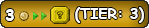
<style>
.page{position:relative;width:149px;height:28px}
.page>*{position:absolute;margin:0}
.t1{font:12px "ComicSansMS-Bold";color:#ffffff}
.t2{font:14.7px "ComicSansMS-Bold";color:#ffffff}
</style>
<div class="page">
<p class="t1" style="left:5px;top:9px;width:9px;height:12px">3</p>
<p class="t2" style="left:75px;top:7px;width:69px;height:16px">(TIER: 3)</p>
</div>
